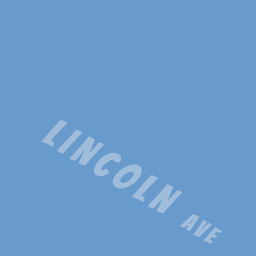
<style>
.page{position:relative;width:256px;height:256px;background:#689bcb}
.page>*{position:absolute;margin:0}
.t1{font:40px "Bangers-Regular";letter-spacing:0.16em;color:#9fbddb}
.t2{font:24px "Bangers-Regular";letter-spacing:0.16em;color:#9fbddb}
</style>
<div class="page">
<p class="t1" style="left:41px;top:119px;width:182px;height:125px;rotate:31deg">LINCOLN <span class="t2">AVE</span></p>
</div>
